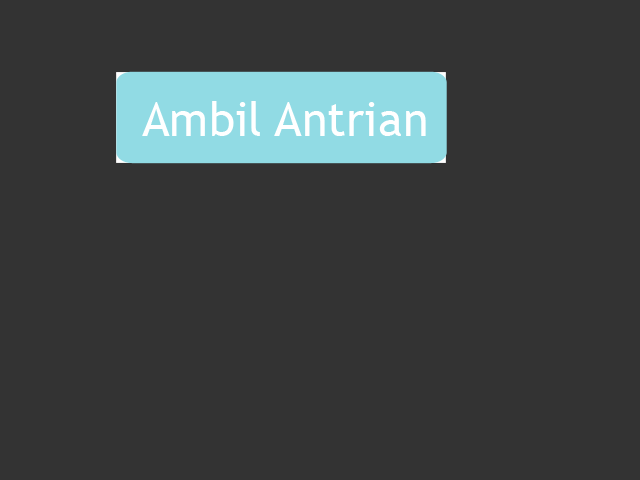
<style>
.page{position:relative;width:640px;height:480px;background:#333333}
.page>*{position:absolute;margin:0}
.t1{font:47.2px "TrebuchetMS";color:#ffffff}
</style>
<div class="page">
<p class="t1" style="left:142px;top:101px;width:284px;height:35px">Ambil Antrian</p>
</div>
